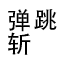
<style>
.page{position:relative;width:64px;height:64px;background:#ffffff}
.page>*{position:absolute;margin:0}
.t1{font:24px/24px "AdobeHeitiStd-Regular";letter-spacing:0.1em;color:#000000}
</style>
<div class="page">
<p class="t1" style="left:8px;top:9px;width:49px;height:46px">弹跳<br>斩</p>
</div>
